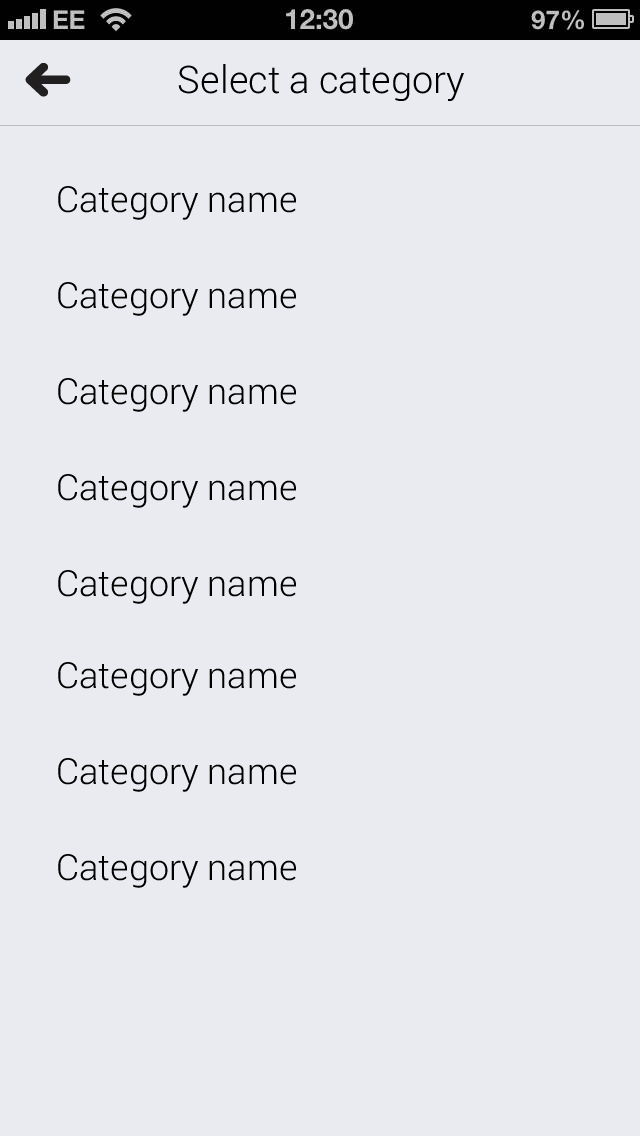
<style>
.page{position:relative;width:640px;height:1136px;background:#e9ebf0}
.page>*{position:absolute;margin:0}
.t1{font:38px "Roboto-Light";color:#000000}
.t2{font:36px "Roboto-Light";color:#000000}
</style>
<div class="page">
<p class="t1" style="left:178px;top:64px;width:286px;height:37px">Select a category</p>
<p class="t2" style="left:58px;top:186px;width:238px;height:34px">Category name</p>
<p class="t2" style="left:58px;top:282px;width:238px;height:34px">Category name</p>
<p class="t2" style="left:58px;top:378px;width:238px;height:34px">Category name</p>
<p class="t2" style="left:58px;top:474px;width:238px;height:34px">Category name</p>
<p class="t2" style="left:58px;top:570px;width:238px;height:34px">Category name</p>
<p class="t2" style="left:58px;top:662px;width:238px;height:34px">Category name</p>
<p class="t2" style="left:58px;top:758px;width:238px;height:34px">Category name</p>
<p class="t2" style="left:58px;top:854px;width:238px;height:34px">Category name</p>
</div>
